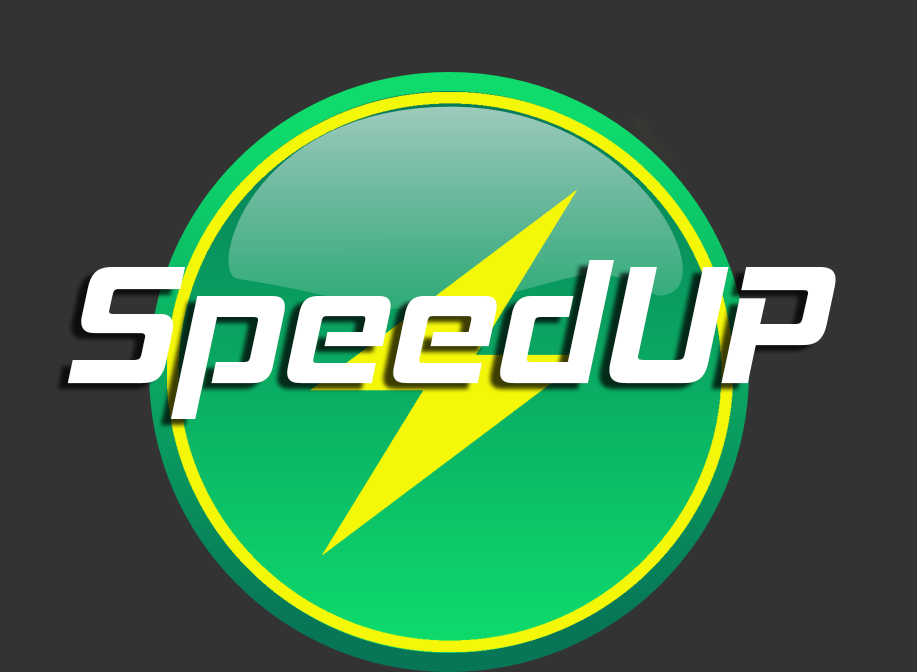
<style>
.page{position:relative;width:917px;height:672px;background:#333333}
.page>*{position:absolute;margin:0}
.t1{font:171.6px "HemiHeadRg-BoldItalic";color:#ffffff}
</style>
<div class="page">
<p class="t1" style="left:67px;top:260px;width:769px;height:159px">SpeedUP</p>
</div>
